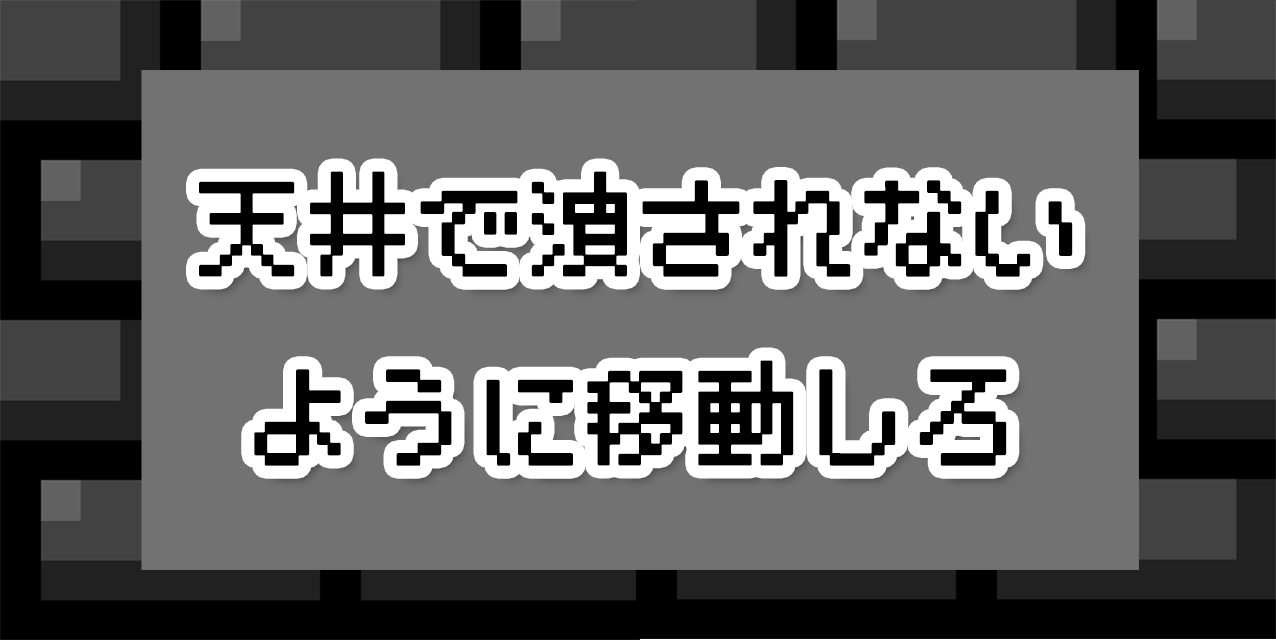
<style>
.page{position:relative;width:1276px;height:640px;background:#727272}
.page>*{position:absolute;margin:0}
.t1{font:108px "BestTen-CRT";color:#000000;font-weight:bold}
</style>
<div class="page">
<p class="t1" style="left:199px;top:171px;width:874px;height:295px;text-align:center">天井で潰されない<br>ように移動しろ</p>
</div>
